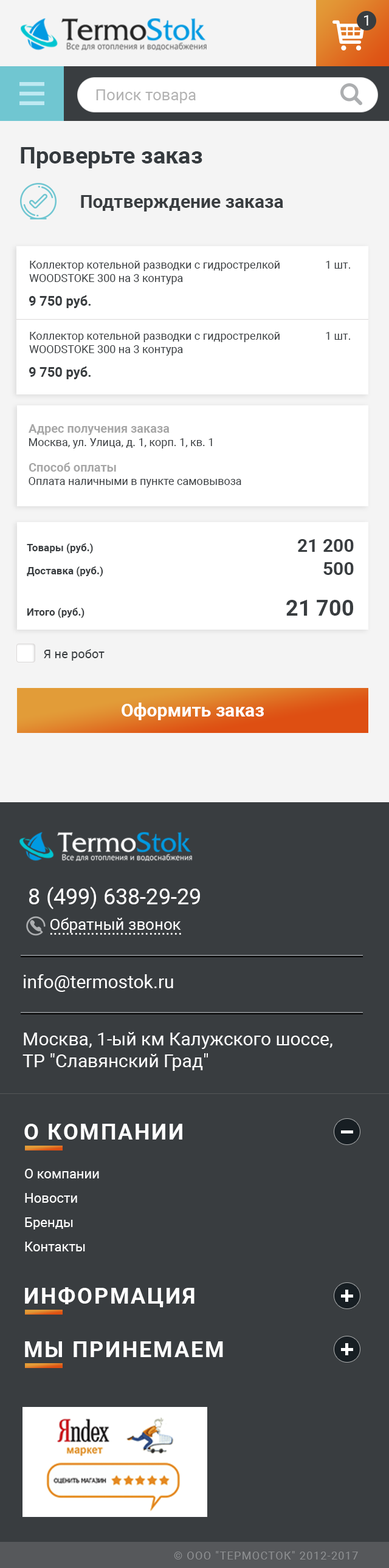
<style>
.page{position:relative;width:389px;height:1568px;background:#393d40}
.page>*{position:absolute;margin:0}
.t1{font:14.6px "Roboto-Regular";color:#ffffff}
.t2{font:15.8px "Roboto-Regular";color:#b2b2b2}
.t3{font:23.1px "Roboto-Bold";color:#353a3e}
.t4{font:18.2px "Roboto-Bold";color:#393d40}
.t5{font:10.9px "Roboto-Regular";color:#393d40}
.t6{font:13.4px "Roboto-Bold";color:#393d40}
.t7{font:12.2px "Roboto-Bold";color:#a7a7a7}
.t8{font:10.3px "Roboto-Bold";color:#393d40}
.t9{font:21.9px "Roboto-Bold";color:#393d40}
.t10{font:12.2px "Roboto-Regular";color:#393d40}
.t11{font:18.2px "Roboto-Bold";color:#ffffff}
.t12{font:21.9px "Roboto-Regular";color:#ffffff}
.t13{font:15.8px "Roboto-Regular";color:#ffffff}
.t14{font:18.2px "Roboto-Regular";color:#ffffff}
.t15{font:21.9px "Roboto-Bold";letter-spacing:0.075em;color:#ffffff;text-transform:uppercase}
.t16{font:13.4px/24.3px "Roboto-Regular";color:#ffffff}
.t17{font:10.9px "Roboto-Regular";letter-spacing:0.075em;color:#8e9092;text-transform:uppercase}
</style>
<div class="page">
<p class="t1" style="left:364px;top:15px;width:4px;height:11px">1</p>
<p class="t2" style="left:96px;top:89px;width:100px;height:14px">Поиск товара</p>
<p class="t3" style="left:21px;top:147px;width:181px;height:21px">Проверьте заказ</p>
<p class="t4" style="left:81px;top:195px;width:202px;height:16px">Подтверждение заказа</p>
<p class="t5" style="left:29px;top:261px;width:251px;height:23px">Коллектор котельной разводки с гидрострелкой <br>WOODSTOKE 300 на 3 контура</p>
<p class="t5" style="left:326px;top:261px;width:24px;height:8px">1 шт.</p>
<p class="t6" style="left:29px;top:295px;width:62px;height:13px">9 750 руб.</p>
<p class="t5" style="left:29px;top:332px;width:251px;height:24px">Коллектор котельной разводки с гидрострелкой <br>WOODSTOKE 300 на 3 контура</p>
<p class="t5" style="left:326px;top:332px;width:24px;height:8px">1 шт.</p>
<p class="t6" style="left:29px;top:366px;width:62px;height:13px">9 750 руб.</p>
<p class="t7" style="left:29px;top:424px;width:141px;height:11px">Адрес получения заказа</p>
<p class="t5" style="left:29px;top:438px;width:183px;height:11px">Москва, ул. Улица, д. 1, корп. 1, кв. 1</p>
<p class="t7" style="left:29px;top:462px;width:87px;height:10px">Способ оплаты</p>
<p class="t5" style="left:29px;top:477px;width:212px;height:10px">Оплата наличными в пункте самовывоза</p>
<p class="t8" style="left:27px;top:543px;width:66px;height:11px">Товары (руб.)</p>
<p class="t4" style="left:298px;top:539px;width:56px;height:13px">21 200</p>
<p class="t8" style="left:27px;top:566px;width:76px;height:11px">Доставка (руб.)</p>
<p class="t4" style="left:323px;top:562px;width:31px;height:13px">500</p>
<p class="t9" style="left:286px;top:600px;width:67px;height:16px">21 700</p>
<p class="t8" style="left:27px;top:608px;width:57px;height:10px">Итого (руб.)</p>
<p class="t10" style="left:44px;top:649px;width:61px;height:12px">Я не робот</p>
<p class="t11" style="left:122px;top:703px;width:142px;height:17px">Оформить заказ</p>
<p class="t12" style="left:29px;top:887px;width:171px;height:22px">8 (499) 638-29-29</p>
<p class="t13" style="left:50px;top:918px;width:131px;height:15px">Обратный звонок</p>
<p class="t13" style="left:50px;top:933px;width:131px;height:2px">................................</p>
<p class="t14" style="left:24px;top:974px;width:149px;height:18px">info@termostok.ru</p>
<p class="t14" style="left:22px;top:1032px;width:310px;height:39px">Москва, 1-ый км Калужского шоссе, <br>ТР "Славянский Град"</p>
<p class="t15" style="left:24px;top:1124px;width:158px;height:16px">О КОМПАНИИ</p>
<p class="t16" style="left:25px;top:1169px;width:74px;height:82px">О компании<br>Новости<br>Бренды<br>Контакты</p>
<p class="t15" style="left:25px;top:1287px;width:169px;height:20px">Информация</p>
<p class="t15" style="left:25px;top:1341px;width:198px;height:16px">Мы принемаем</p>
<p class="t17" style="left:174px;top:1551px;width:184px;height:8px">© ООО "Термосток" 2012-2017</p>
</div>
